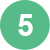
<style>
.page{position:relative;width:50px;height:50px;background:#56bb89}
.page>*{position:absolute;margin:0}
.t1{font:30px "Arial-BoldMT";color:#ffffff}
</style>
<div class="page">
<p class="t1" style="left:18px;top:14px;width:15px;height:22px">5</p>
</div>
